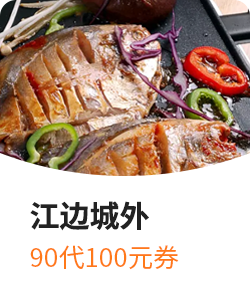
<style>
.page{position:relative;width:250px;height:300px;background:#ffffff}
.page>*{position:absolute;margin:0}
.t1{font:30px "SourceHanSansCN-Bold";color:#222222}
.t2{font:26px "SourceHanSansCN-Regular";color:#ff7919}
</style>
<div class="page">
<p class="t1" style="left:30px;top:201px;width:119px;height:30px">江边城外</p>
<p class="t2" style="left:30px;top:245px;width:149px;height:25px">90代100元券</p>
</div>
